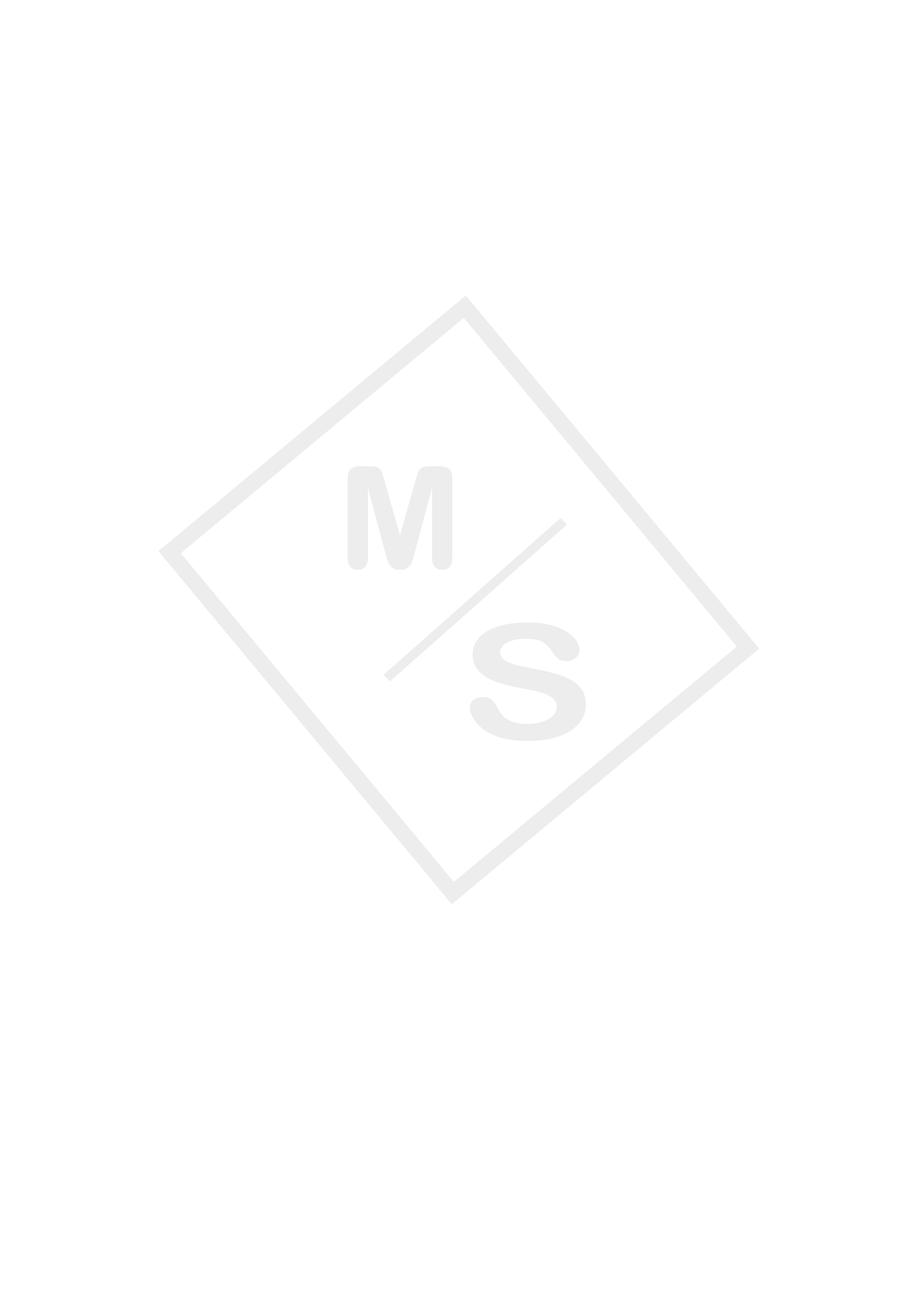
<style>
.page{position:relative;width:918px;height:1299px;background:#ffffff}
.page>*{position:absolute;margin:0}
.t1{font:142.2px "ArialRoundedMTBold";color:#ededed;scale:1.06 1}
.t2{font:160.1px "ArialRoundedMTBold";color:#ededed;scale:1.27 1}
</style>
<div class="page">
<p class="t1" style="left:348px;top:466px;width:104px;height:104px">M</p>
<p class="t2" style="left:470px;top:622px;width:116px;height:119px">S</p>
</div>
